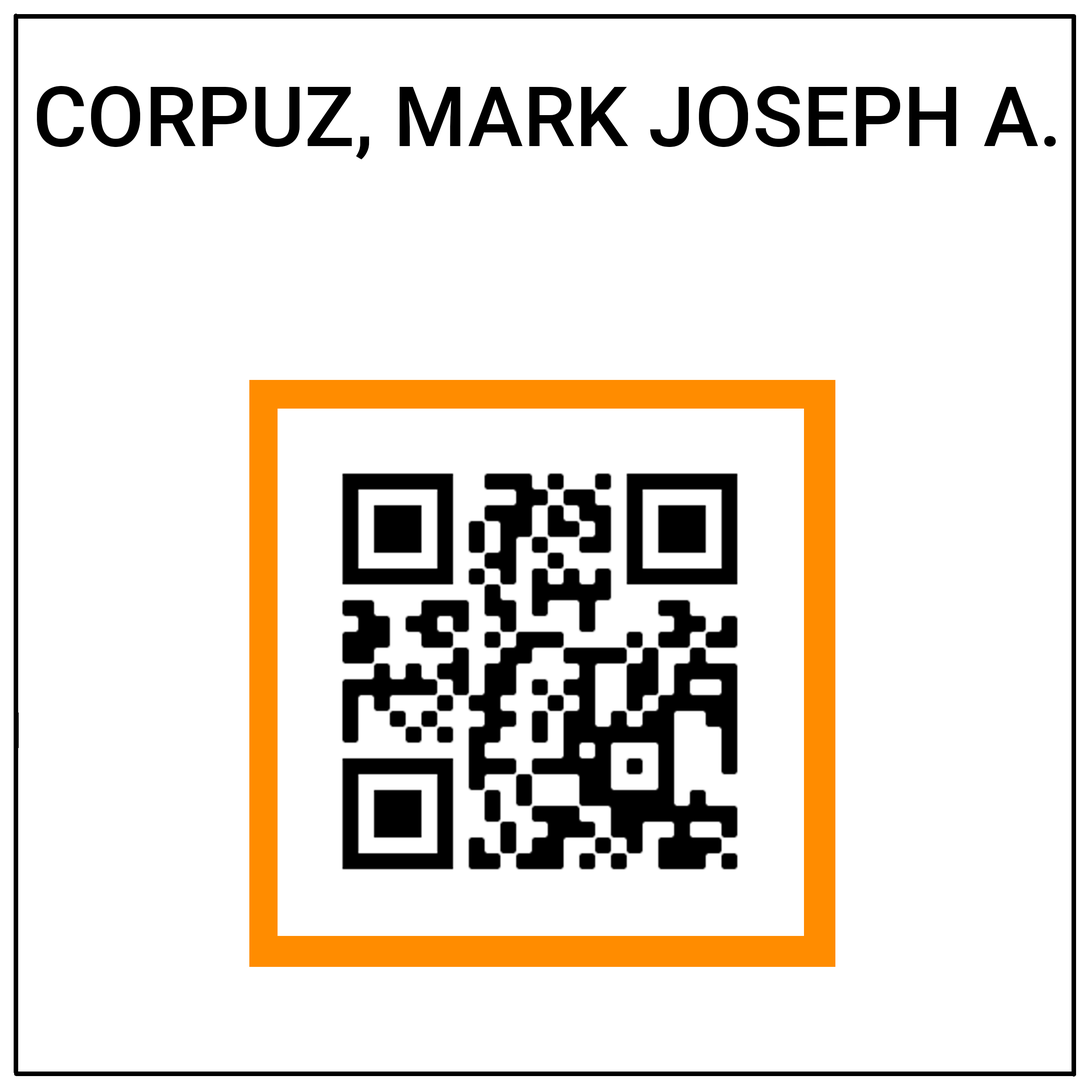
<style>
.page{position:relative;width:1092px;height:1092px;background:#ffffff}
.page>*{position:absolute;margin:0}
.t1{font:83.4px "Roboto-Medium";color:#000000}
</style>
<div class="page">
<p class="t1" style="left:37px;top:86px;width:1019px;height:74px">CORPUZ, MARK JOSEPH A.</p>
</div>
